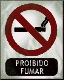
<style>
.page{position:relative;width:64px;height:80px}
.page>*{position:absolute;margin:0}
.t1{font:8px/8px "TrebuchetMS";letter-spacing:0.08em;scale:0.86 1}
</style>
<div class="page">
<p class="t1" style="left:16px;top:60px;width:32px;height:14px;text-align:center">PROIBIDO<br>FUMAR</p>
</div>
